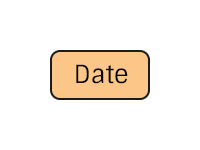
<style>
.page{position:relative;width:200px;height:150px;background:#ffffff}
.page>*{position:absolute;margin:0}
.t1{font:25px "Sintony";color:#000000}
</style>
<div class="page">
<p class="t1" style="left:76px;top:64px;width:52px;height:20px">Date</p>
</div>
